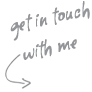
<style>
.page{position:relative;width:92px;height:92px;background:#ffffff}
.page>*{position:absolute;margin:0}
.t1{font:25px "Romy";color:#939598}
</style>
<div class="page">
<p class="t1" style="left:10px;top:1px;width:80px;height:59px;text-align:center">get in touch with me</p>
</div>
